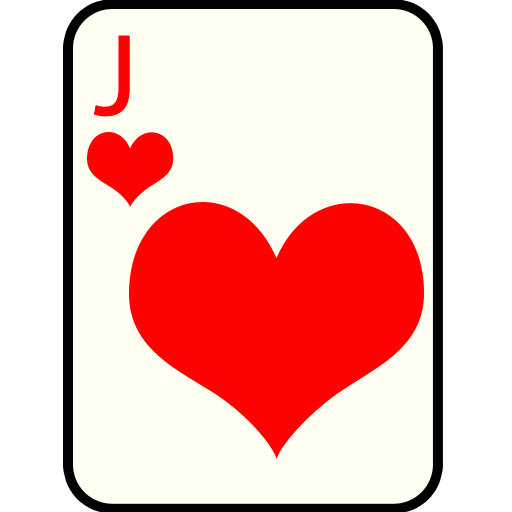
<style>
.page{position:relative;width:512px;height:512px;background:#fffff2}
.page>*{position:absolute;margin:0}
.t1{font:200px "MyriadPro-Regular";letter-spacing:-0.05em;color:#fd0202;font-variant:small-caps;font-weight:bold}
</style>
<div class="page">
<p class="t1" style="left:94px;top:35px;width:36px;height:82px">J</p>
</div>
